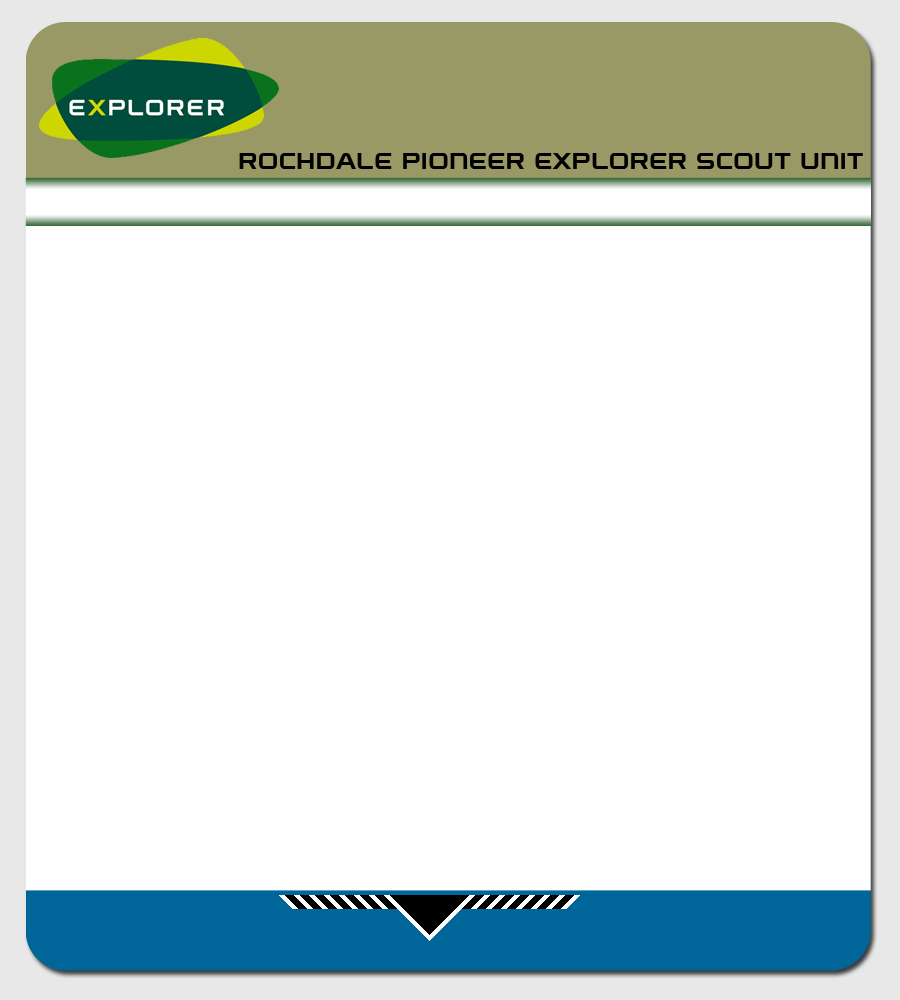
<style>
.page{position:relative;width:900px;height:1000px;background:#ffffff}
.page>*{position:absolute;margin:0}
.t1{font:24px "Explorer";color:#000000}
</style>
<div class="page">
<p class="t1" style="left:239px;top:153px;width:624px;height:16px">ROCHDALE PIONEER EXPLORER SCOUT UNIT</p>
</div>
